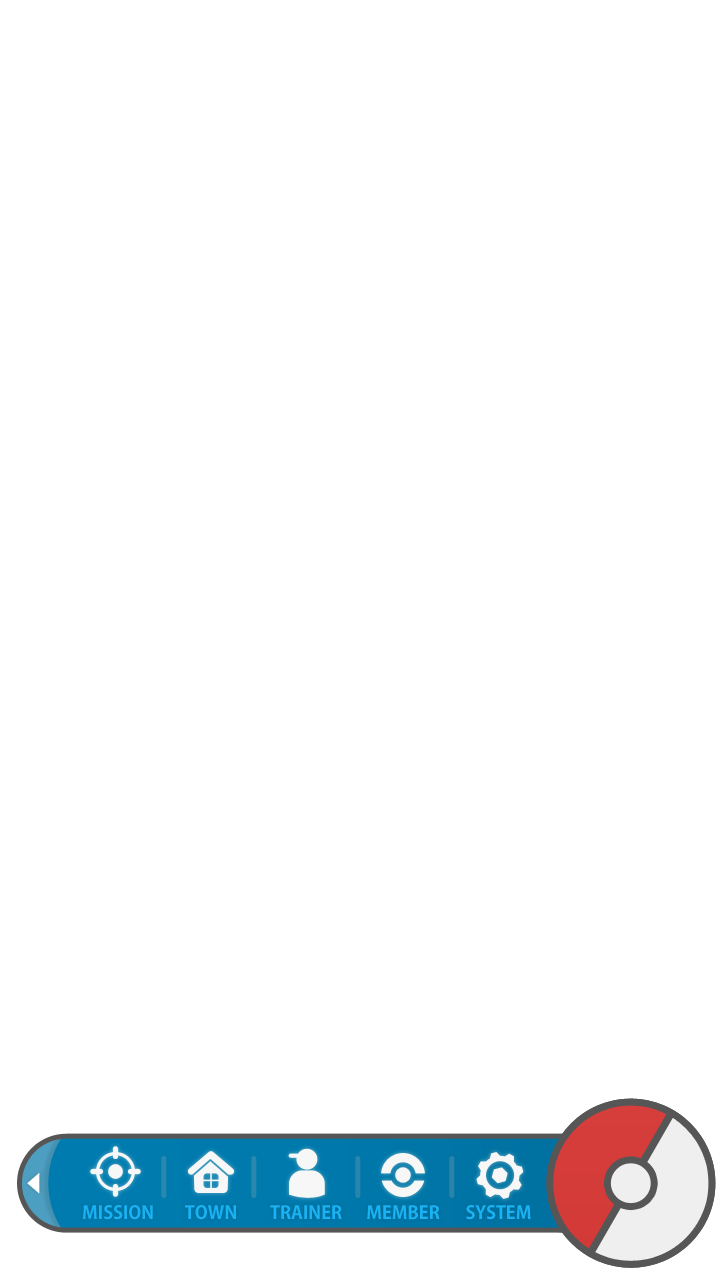
<style>
.page{position:relative;width:720px;height:1280px;background:#ffffff}
.page>*{position:absolute;margin:0}
.t1{font:18px "AdobeGothicStd-Bold";color:#1ab2f2}
</style>
<div class="page">
<p class="t1" style="left:83px;top:1205px;width:70px;height:15px">MISSION</p>
<p class="t1" style="left:185px;top:1205px;width:51px;height:15px">TOWN</p>
<p class="t1" style="left:270px;top:1205px;width:72px;height:14px">TRAINER</p>
<p class="t1" style="left:367px;top:1205px;width:73px;height:15px">MEMBER</p>
<p class="t1" style="left:466px;top:1205px;width:65px;height:15px">SYSTEM</p>
</div>
